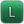
<style>
.page{position:relative;width:24px;height:24px}
.page>*{position:absolute;margin:0}
.t1{font:14px "MyriadPro-Regular";color:#a6beb5}
</style>
<div class="page">
<p class="t1" style="left:9px;top:7px;width:6px;height:10px">L</p>
</div>
